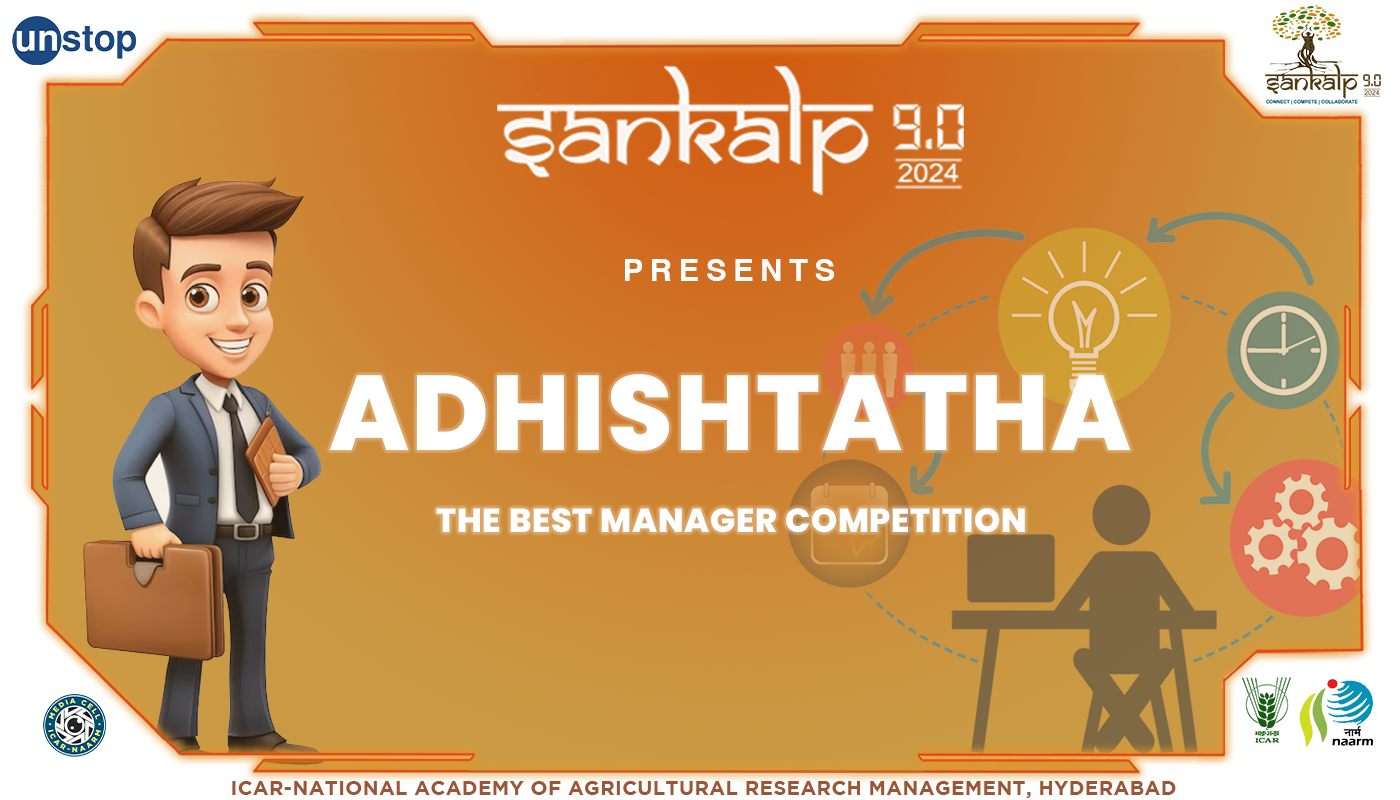
<style>
.page{position:relative;width:1400px;height:800px}
.page>*{position:absolute;margin:0}
.t1{font:31.4px "Helvetica-Bold";letter-spacing:0.2em;color:#ffffff}
.t2{font:106px "Poppins-ExtraBold";letter-spacing:0.02em;color:#ffffff}
.t3{font:33.3px "Poppins-ExtraBold";letter-spacing:0.02em;color:#ffffff}
.t4{font:20px "Gotham-Bold";letter-spacing:0.02em;color:#9a5637}
</style>
<div class="page">
<p class="t1" style="left:625px;top:259px;width:210px;height:22px">PRESENTS</p>
<p class="t2" style="left:329px;top:374px;width:802px;height:77px">ADHISHTATHA</p>
<p class="t3" style="left:436px;top:508px;width:589px;height:25px">THE BEST MANAGER COMPETITION</p>
<p class="t4" style="left:232px;top:781px;width:944px;height:17px">ICAR-NATIONAL ACADEMY OF AGRICULTURAL RESEARCH MANAGEMENT, HYDERABAD</p>
</div>
